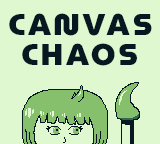
<style>
.page{position:relative;width:160px;height:144px;background:#e0f8cf}
.page>*{position:absolute;margin:0}
.t1{font:30px/30px "MuseoModerno-Black";letter-spacing:0.1em;color:#071821}
</style>
<div class="page">
<p class="t1" style="left:9px;top:13px;width:143px;height:53px">CANVAS<br>             CHAOS</p>
</div>
